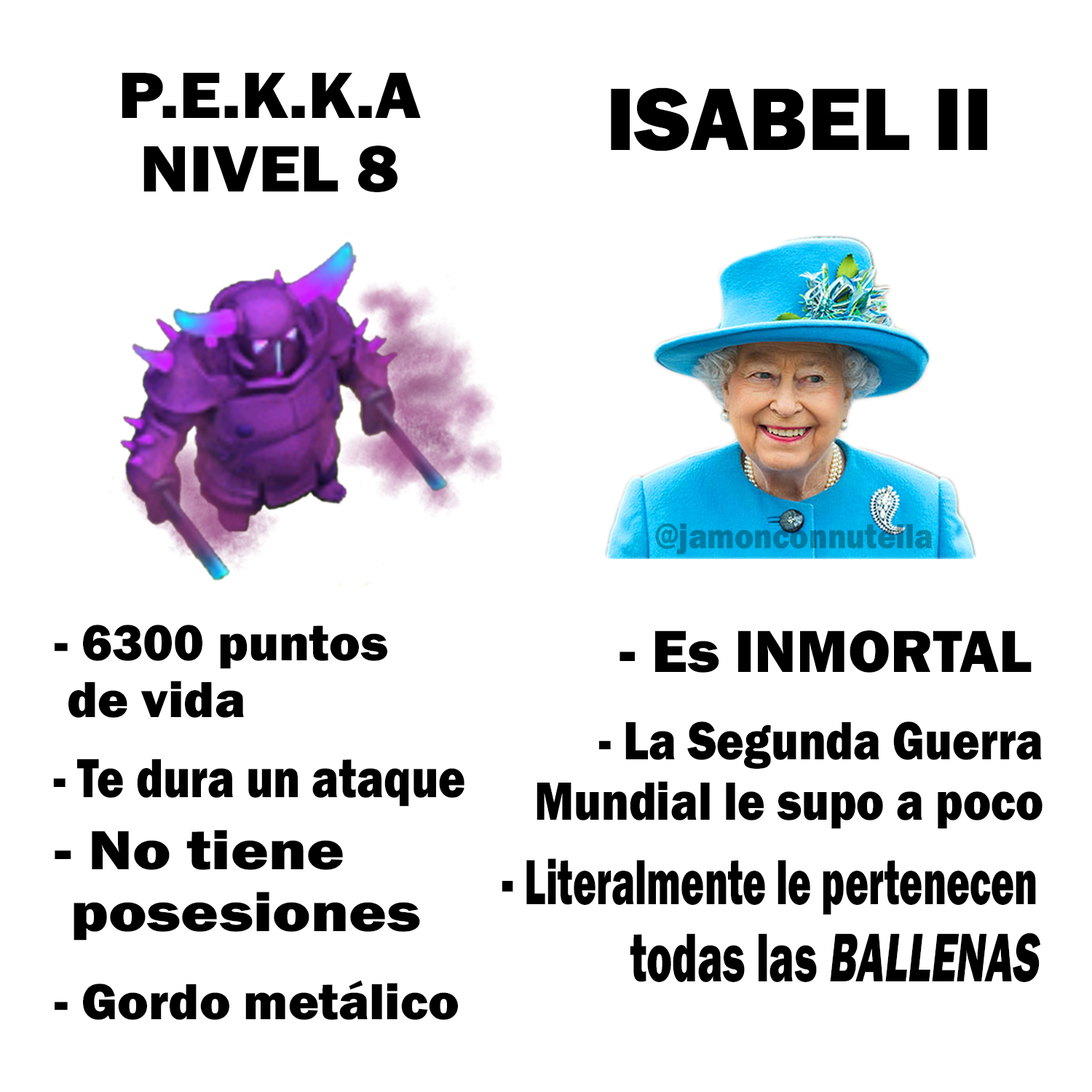
<style>
.page{position:relative;width:1092px;height:1092px;background:#ffffff}
.page>*{position:absolute;margin:0}
.t1{font:67.7px "FranklinGothic-Heavy";color:#000000;scale:1.06 1}
.t2{font:91.7px "FranklinGothic-Heavy";color:#000000}
.t3{font:36px "FranklinGothic-Heavy";color:#017ca3;scale:0.89 1}
.t4{font:52.4px "FranklinGothic-Heavy";color:#000000}
.t5{font:61.3px "FranklinGothic-Heavy";color:#000000}
.t6{font:55.6px "FranklinGothic-Heavy";color:#000000;scale:0.84 1}
.t7{font:56.9px "FranklinGothic-Heavy";color:#000000;scale:0.81 1}
.t8{font:57px "FranklinGothic-Heavy";color:#000000;scale:1.13 1}
.t9{font:66px "FranklinGothic-Heavy";color:#000000;scale:0.61 1}
.t10{font:71.1px "FranklinGothic-Heavy";color:#000000;scale:0.61 1}
.t11{font:71.1px "FranklinGothic-Heavy";color:#000000;font-style:italic;scale:0.61 1}
</style>
<div class="page">
<p class="t1" style="left:122px;top:73px;width:299px;height:119px;text-align:center">P.E.K.K.A<br>NIVEL 8</p>
<p class="t2" style="left:611px;top:87px;width:376px;height:64px">ISABEL II</p>
<p class="t3" style="left:655px;top:523px;width:278px;height:32px">@jamonconnutella</p>
<p class="t4" style="left:55px;top:625px;width:332px;height:93px">- 6300 puntos<br> de vida</p>
<p class="t5" style="left:620px;top:630px;width:412px;height:43px">- Es INMORTAL</p>
<p class="t6" style="left:537px;top:721px;width:505px;height:107px;text-align:right">- La Segunda Guerra<br>Mundial le supo a poco</p>
<p class="t7" style="left:53px;top:759px;width:411px;height:48px">- Te dura un ataque</p>
<p class="t8" style="left:55px;top:830px;width:365px;height:111px">- No tiene<br> posesiones</p>
<p class="t9" style="left:502px;top:858px;width:538px;height:124px;text-align:right"><span class="t10">- </span>Literalmente le pertenecen<br><span class="t10">todas las </span><span class="t11">BALLENAS</span></p>
<p class="t4" style="left:55px;top:980px;width:403px;height:40px">- Gordo metálico</p>
</div>
